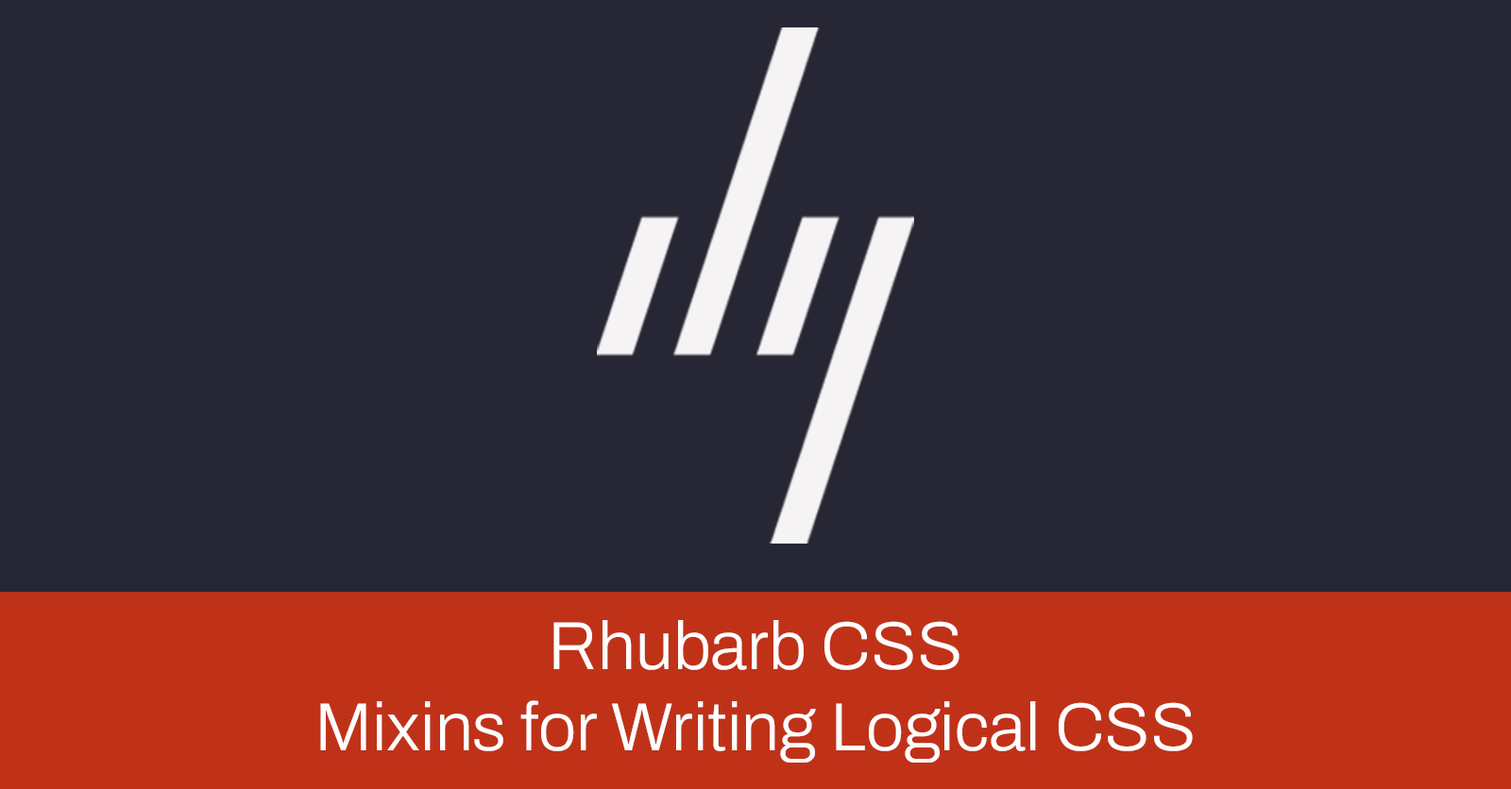
<style>
.page{position:relative;width:1511px;height:789px;background:#262634}
.page>*{position:absolute;margin:0}
.t1{font:68px "Archivo-Light";color:#ffffff}
</style>
<div class="page">
<p class="t1" style="left:320px;top:620px;width:872px;height:143px;text-align:center">Rhubarb CSS<br>Mixins for Writing Logical CSS</p>
</div>
